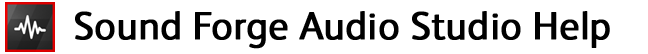
<style>
.page{position:relative;width:648px;height:54px;background:#ffffff}
.page>*{position:absolute;margin:0}
.t1{font:39.1px "FSAlbertPro";color:#000000;font-weight:bold}
</style>
<div class="page">
<p class="t1" style="left:75px;top:11px;width:535px;height:38px">Sound Forge Audio Studio Help</p>
</div>
